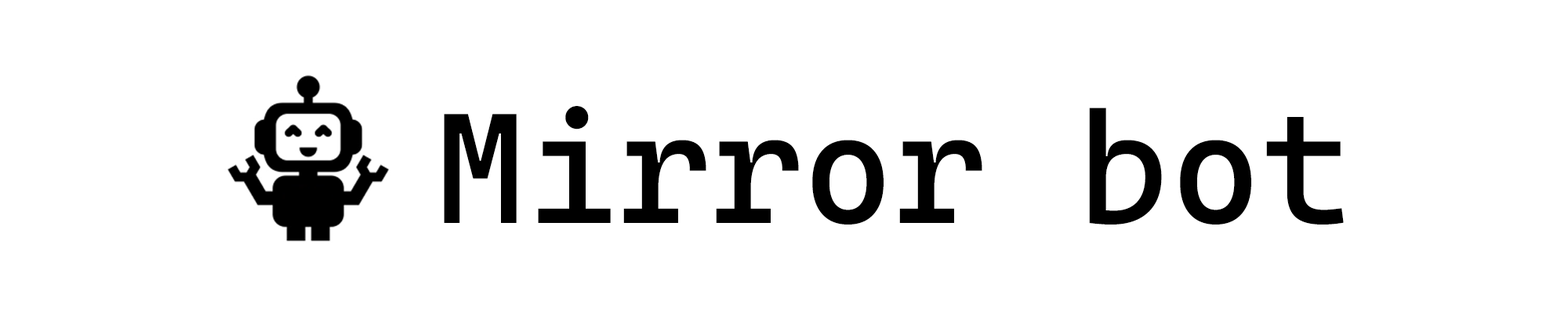
<style>
.page{position:relative;width:1568px;height:314px;background:#ffffff}
.page>*{position:absolute;margin:0}
.t1{font:156.8px "CascadiaCode-Regular";color:#000000;font-weight:bold}
</style>
<div class="page">
<p class="t1" style="left:444px;top:106px;width:900px;height:118px">Mirror bot</p>
</div>
